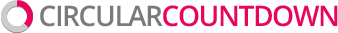
<style>
.page{position:relative;width:338px;height:33px;background:#ffffff}
.page>*{position:absolute;margin:0}
.t1{font:28.3px "OpenSans-Semibold";letter-spacing:-0.05em;color:#e8065c;text-transform:uppercase}
.t2{font:28.3px "OpenSans-Semibold";letter-spacing:-0.05em;color:#7a7a7a;text-transform:uppercase}
</style>
<div class="page">
<p class="t1" style="left:40px;top:5px;width:298px;height:22px"><span class="t2">CIRCULAR</span>COUNTDOWN</p>
</div>
